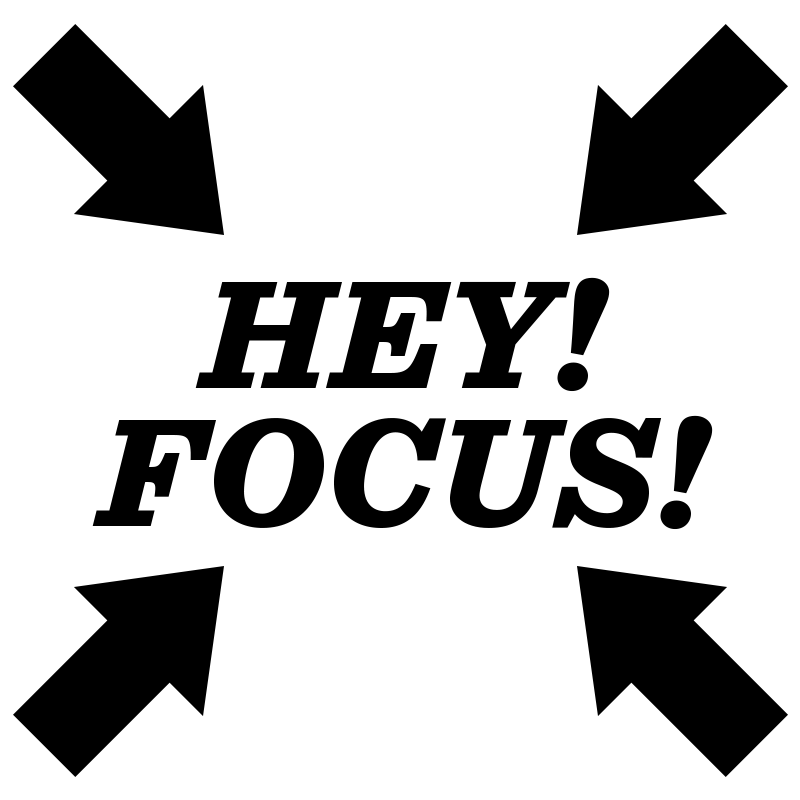
<style>
.page{position:relative;width:800px;height:800px;background:#ffffff}
.page>*{position:absolute;margin:0}
.t1{font:161.3px/137.9px "Sentinel-BlackItalic";color:#000000;text-transform:uppercase}
</style>
<div class="page">
<p class="t1" style="left:92px;top:277px;width:621px;height:253px;text-align:center">Hey!<br>Focus!</p>
</div>
